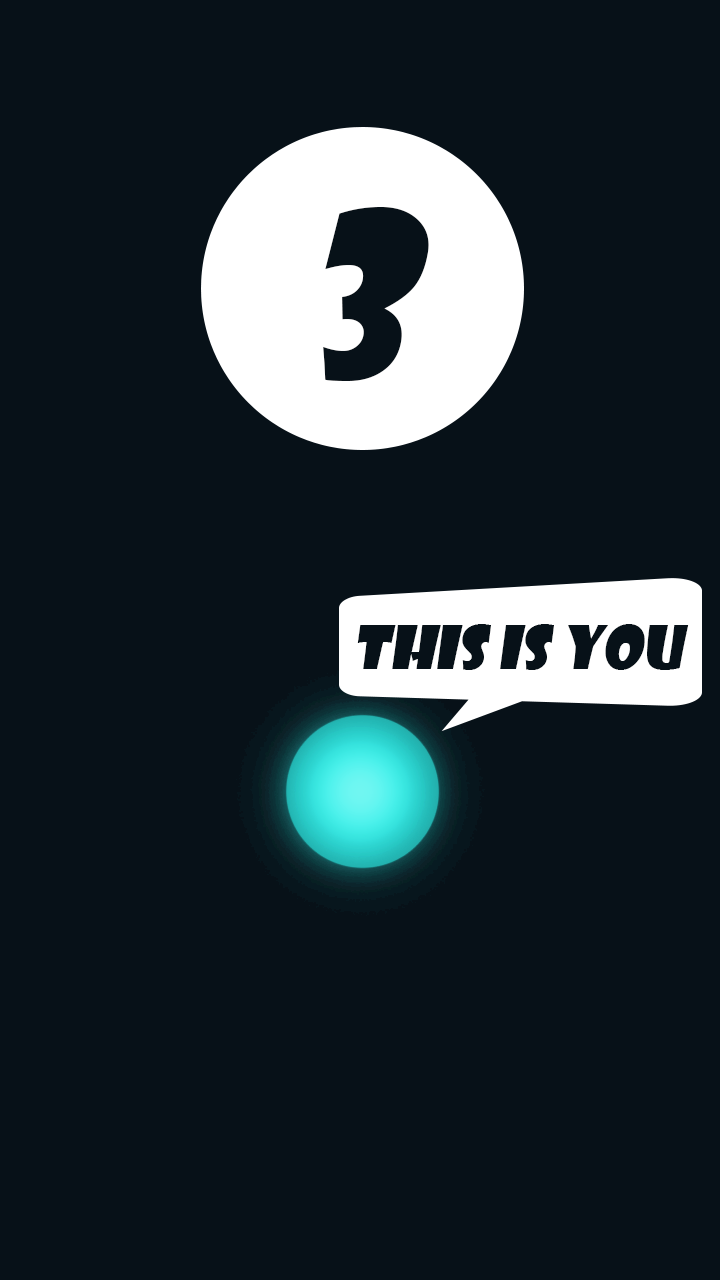
<style>
.page{position:relative;width:720px;height:1280px;background:#071118}
.page>*{position:absolute;margin:0}
.t1{font:225px "ShowcardGothic-Reg";color:#071118;font-style:italic}
.t2{font:58.3px "ShowcardGothic-Reg";color:#071118;font-style:italic}
</style>
<div class="page">
<p class="t1" style="left:323px;top:206px;width:106px;height:175px">3</p>
<p class="t2" style="left:357px;top:624px;width:332px;height:46px">This is you</p>
</div>
